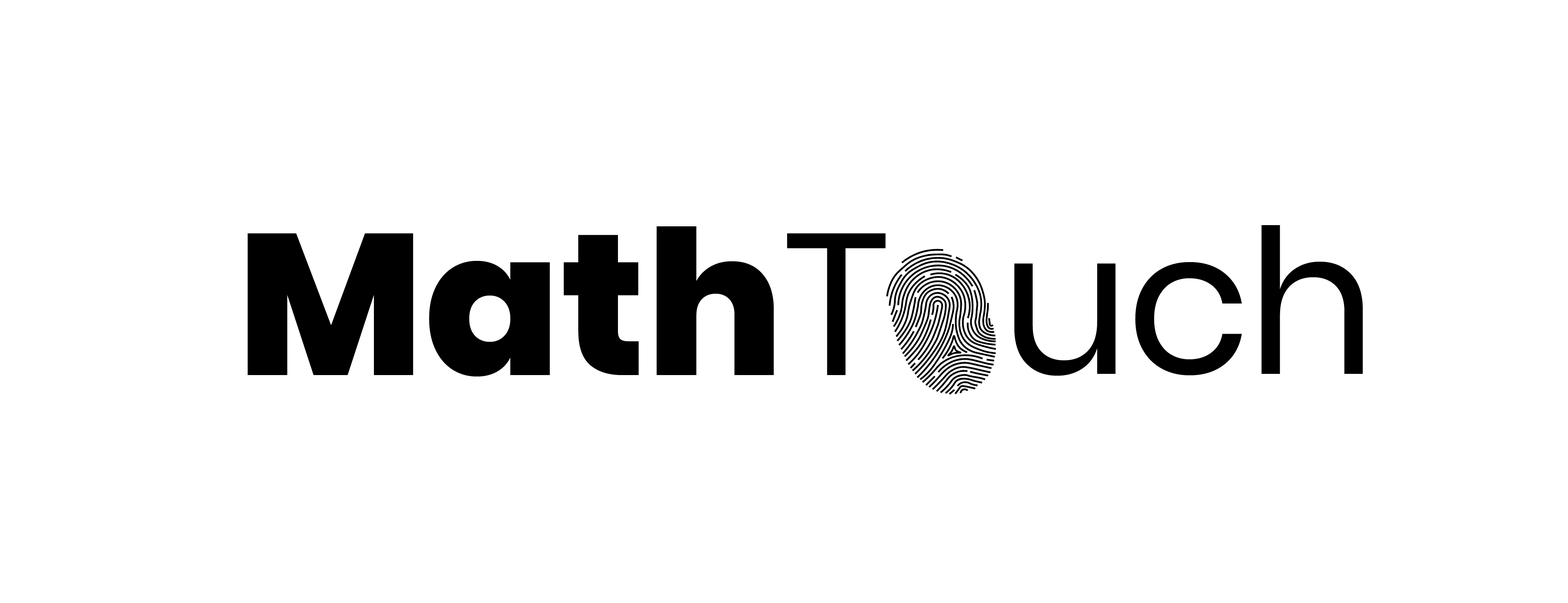
<style>
.page{position:relative;width:1568px;height:603px;background:#ffffff}
.page>*{position:absolute;margin:0}
.t1{font:201px "Poppins-ExtraBold";color:#000000}
.t2{font:201px "Poppins-Regular";color:#000000}
.t3{font:201px "Poppins-Regular";letter-spacing:-0.02em;color:#000000}
</style>
<div class="page">
<p class="t1" style="left:248px;top:226px;width:638px;height:151px">Math<span class="t2">T</span></p>
<p class="t3" style="left:1014px;top:225px;width:349px;height:151px">uch</p>
</div>
